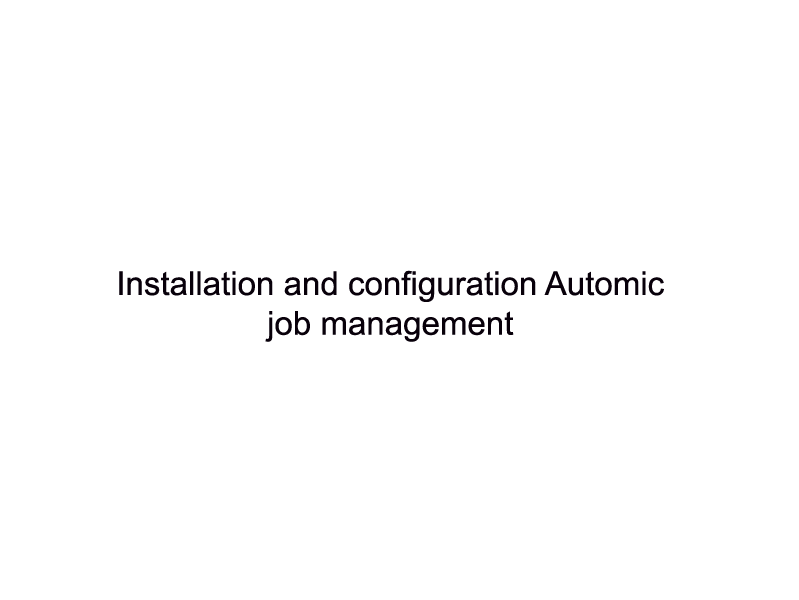
<style>
.page{position:relative;width:799px;height:600px;background:#ffffff}
.page>*{position:absolute;margin:0}
.t1{font:33.1px "ArialMT";color:#08000a}
</style>
<div class="page">
<p class="t1" style="left:119px;top:270px;width:545px;height:72px;text-align:center">Installation and configuration Automic<br>job management</p>
</div>
